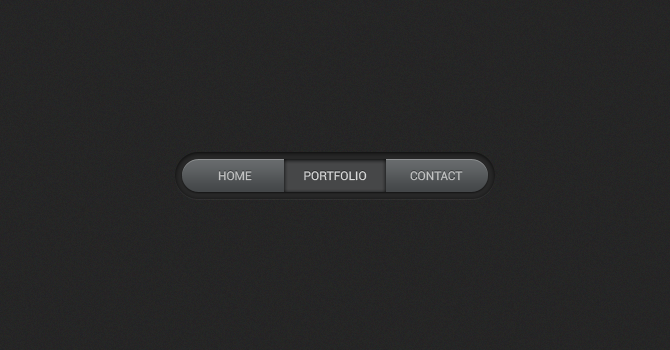
<style>
.page{position:relative;width:670px;height:350px}
.page>*{position:absolute;margin:0}
.t1{font:12px "Roboto-Regular";color:#c2c3c3;text-transform:uppercase}
.t2{font:12px "Roboto-Regular";color:#d9dada;text-transform:uppercase}
</style>
<div class="page">
<p class="t1" style="left:218px;top:171px;width:34px;height:10px">Home</p>
<p class="t2" style="left:304px;top:171px;width:63px;height:10px">portfolio</p>
<p class="t1" style="left:410px;top:171px;width:53px;height:10px">contact</p>
</div>
